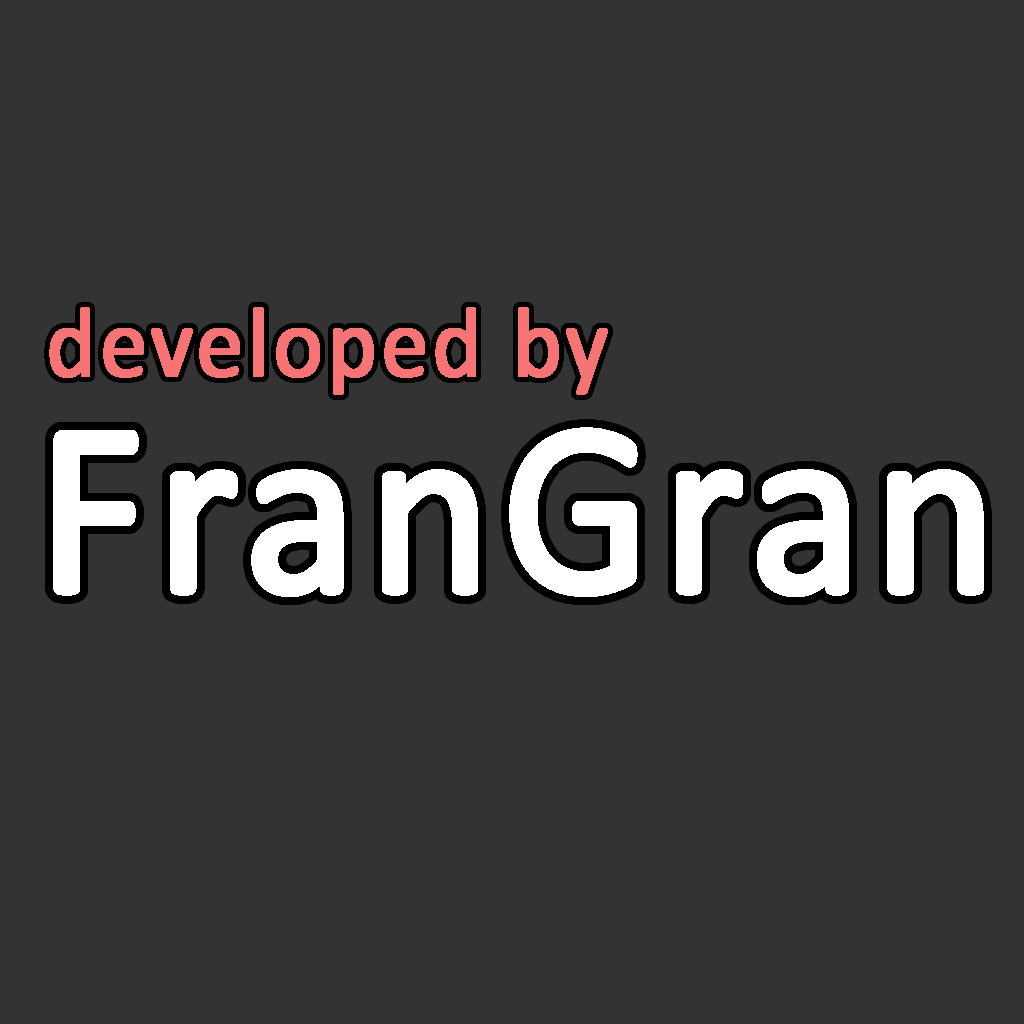
<style>
.page{position:relative;width:1024px;height:1024px;background:#333333}
.page>*{position:absolute;margin:0}
.t1{font:100px "Calibri";letter-spacing:0.02em;color:#f87373;font-weight:bold;scale:0.94 1}
.t2{font:250px "Calibri";letter-spacing:0.02em;color:#ffffff;font-weight:bold;scale:0.94 1}
</style>
<div class="page">
<p class="t1" style="left:49px;top:307px;width:559px;height:88px">developed by</p>
<p class="t2" style="left:53px;top:427px;width:931px;height:170px">FranGran</p>
</div>
